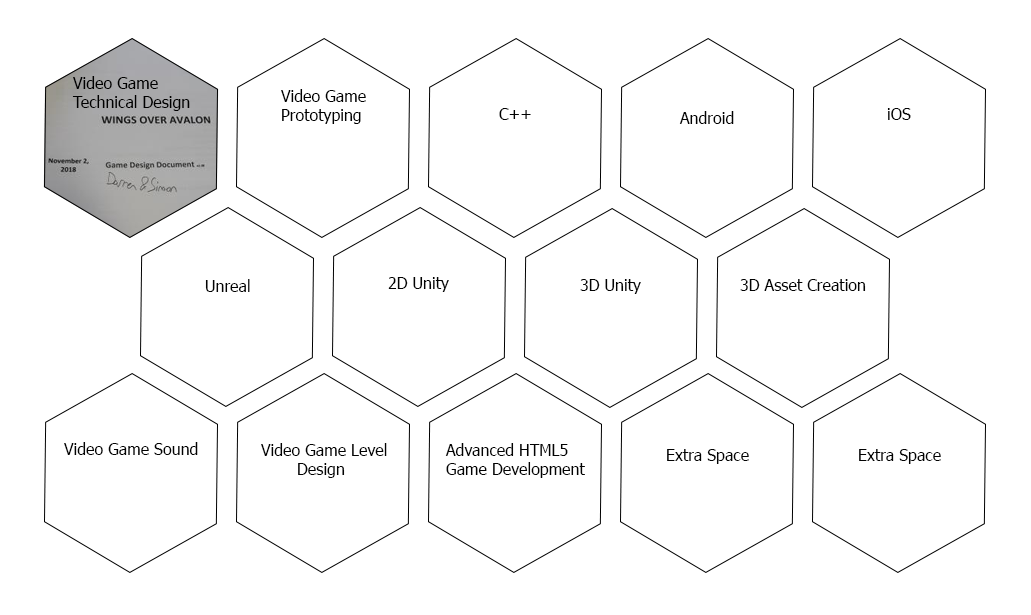
<style>
.page{position:relative;width:1031px;height:615px;background:#ffffff}
.page>*{position:absolute;margin:0}
.t1{font:12px "Tahoma";color:#000000}
.t2{font:16px "Tahoma";color:#000000}
.t3{font:16px "Tahoma";color:#020202}
</style>
<div class="page">
<p class="t1" style="left:72px;top:76px;width:118px;height:35px">Video Game<br>Technical Design</p>
<p class="t2" style="left:281px;top:89px;width:85px;height:35px">Video Game<br>Prototyping</p>
<p class="t3" style="left:499px;top:108px;width:32px;height:12px"><span class="t2">C</span>++</p>
<p class="t3" style="left:679px;top:111px;width:55px;height:13px">Android</p>
<p class="t3" style="left:887px;top:108px;width:24px;height:12px">iOS</p>
<p class="t3" style="left:205px;top:279px;width:45px;height:13px">Unreal</p>
<p class="t3" style="left:388px;top:277px;width:61px;height:15px">2D Unity</p>
<p class="t3" style="left:580px;top:279px;width:61px;height:15px">3D Unity</p>
<p class="t3" style="left:740px;top:279px;width:126px;height:12px">3D Asset Creation</p>
<p class="t3" style="left:64px;top:442px;width:134px;height:13px">Video Game Sound</p>
<p class="t3" style="left:261px;top:443px;width:126px;height:35px">Video Game Level<br> Design</p>
<p class="t3" style="left:445px;top:443px;width:140px;height:35px">Advanced HTML5<br>Game Development</p>
<p class="t3" style="left:667px;top:449px;width:82px;height:15px">Extra Space</p>
<p class="t3" style="left:859px;top:449px;width:82px;height:15px">Extra Space</p>
</div>
